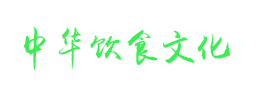
<style>
.page{position:relative;width:273px;height:95px;background:#ffffff}
.page>*{position:absolute;margin:0}
.t1{font:36px "yuweij";color:#3bee54;font-variant:small-caps}
</style>
<div class="page">
<p class="t1" style="left:23px;top:26px;width:207px;height:44px">中华饮食文化</p>
</div>
